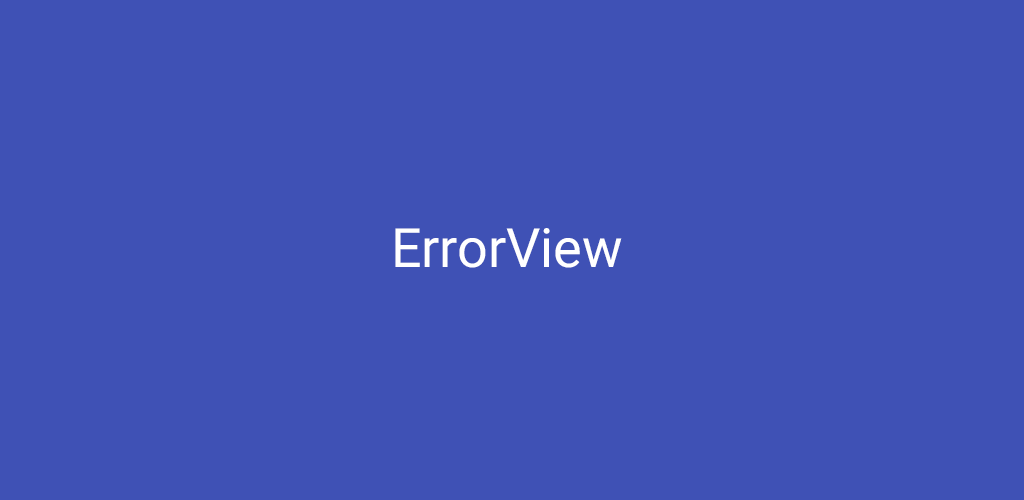
<style>
.page{position:relative;width:1024px;height:500px;background:#3f51b5}
.page>*{position:absolute;margin:0}
.t1{font:54px "Roboto-Regular";color:#ffffff}
</style>
<div class="page">
<p class="t1" style="left:395px;top:228px;width:227px;height:40px">ErrorView</p>
</div>
